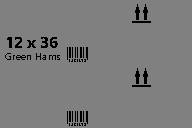
<style>
.page{position:relative;width:192px;height:128px;background:#808080}
.page>*{position:absolute;margin:0}
.t1{font:10px "SegoeUI";color:#000000}
.t2{font:16.4px "SegoeUI-Bold";color:#000000}
</style>
<div class="page">
<p class="t1" style="left:5px;top:37px;width:55px;height:23px;text-align:right"><span class="t2">12 x 36<br></span>Green Hams</p>
</div>
